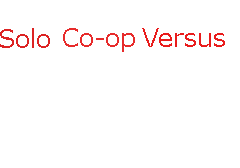
<style>
.page{position:relative;width:240px;height:168px;background:#ffffff}
.page>*{position:absolute;margin:0}
.t1{font:25px "MSReferenceSansSerif";color:#dc2323}
.t2{font:25px "MSReferenceSansSerif";color:#e72b2b}
.t3{font:25px "MSReferenceSansSerif";color:#e91c1c}
</style>
<div class="page">
<p class="t1" style="left:0px;top:28px;width:50px;height:20px">Solo</p>
<p class="t2" style="left:63px;top:28px;width:72px;height:24px">Co-op</p>
<p class="t3" style="left:142px;top:28px;width:83px;height:19px">Versus</p>
</div>
